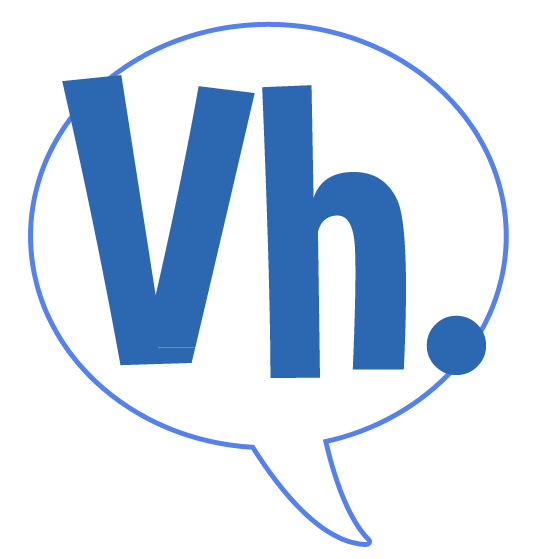
<style>
.page{position:relative;width:537px;height:559px;background:#ffffff}
.page>*{position:absolute;margin:0}
.t1{font:412.5px "DimboRegular";letter-spacing:0.01em;color:#2c68b1}
</style>
<div class="page">
<p class="t1" style="left:62px;top:75px;width:424px;height:303px">Vh.</p>
</div>
